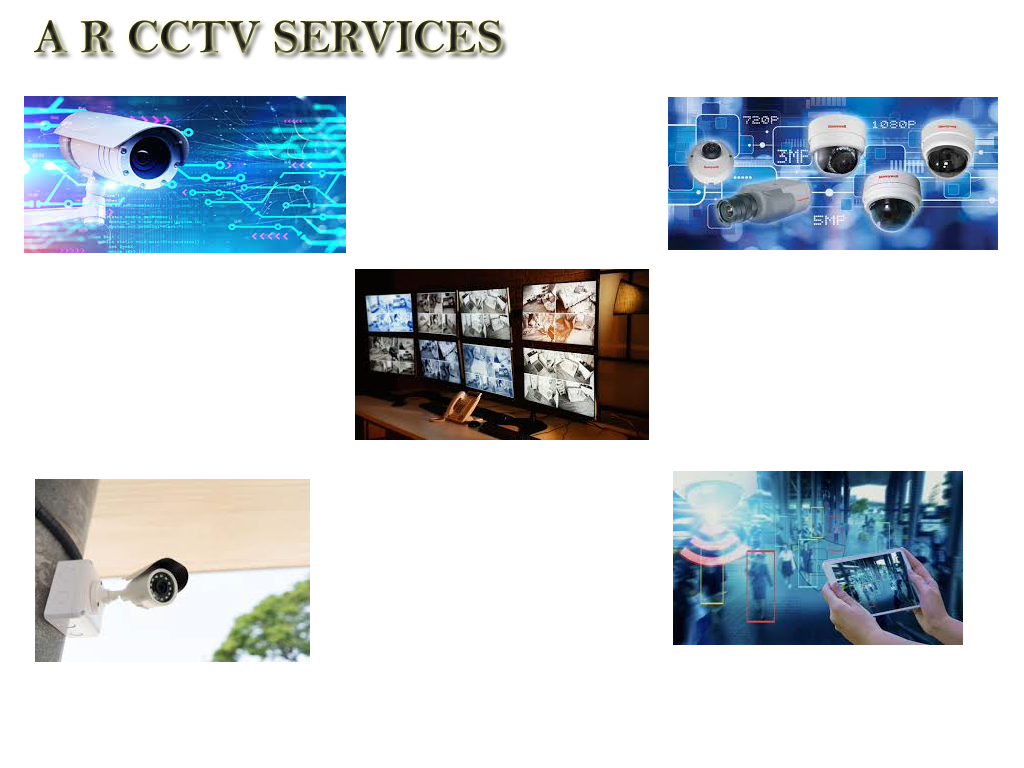
<style>
.page{position:relative;width:1024px;height:768px;background:#ffffff}
.page>*{position:absolute;margin:0}
.t1{font:48px "BellMTBold"}
</style>
<div class="page">
<p class="t1" style="left:34px;top:20px;width:468px;height:33px">A R CCTV SERVICES</p>
</div>
